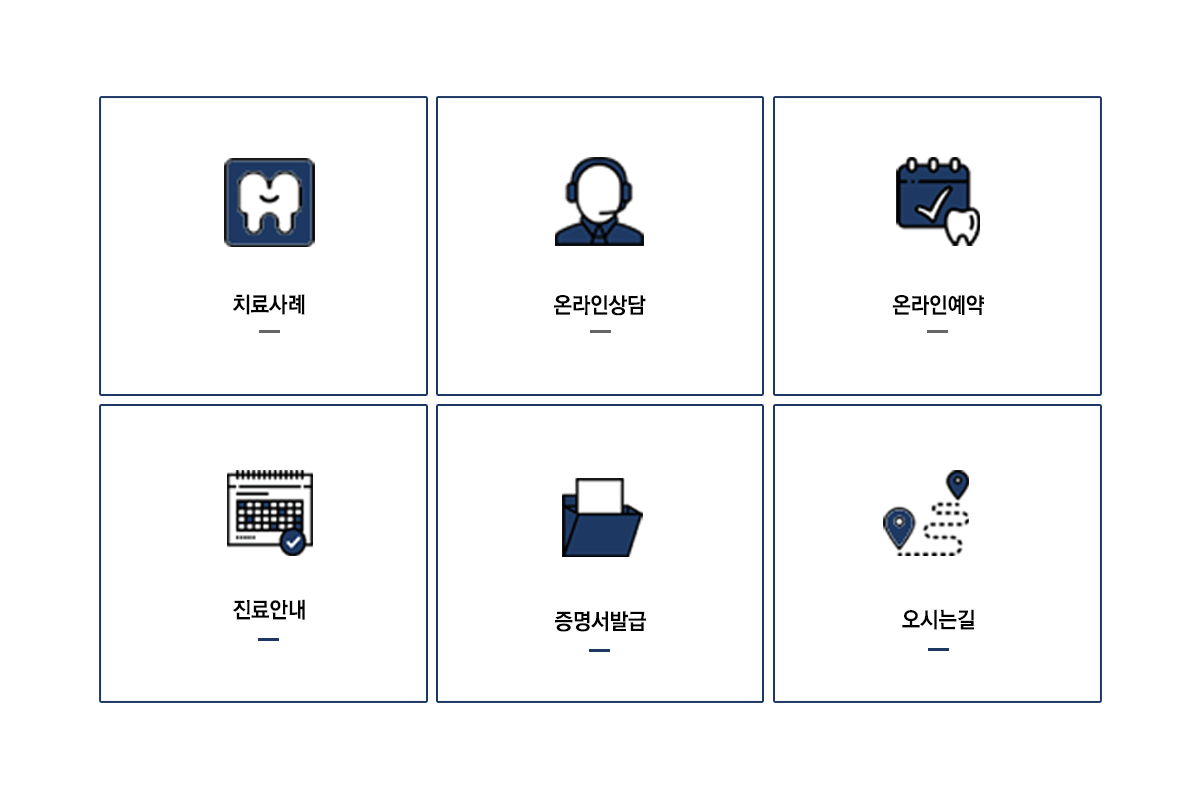
<style>
.page{position:relative;width:1200px;height:800px;background:#ffffff}
.page>*{position:absolute;margin:0}
.t1{font:22px "RixGoB";letter-spacing:-0.015em;color:#000000;scale:0.95 1}
</style>
<div class="page">
<p class="t1" style="left:233px;top:294px;width:72px;height:21px">치료사례</p>
<p class="t1" style="left:554px;top:295px;width:92px;height:21px">온라인상담</p>
<p class="t1" style="left:892px;top:295px;width:92px;height:20px">온라인예약</p>
<p class="t1" style="left:233px;top:599px;width:72px;height:21px">진료안내</p>
<p class="t1" style="left:555px;top:611px;width:91px;height:21px">증명서발급</p>
<p class="t1" style="left:902px;top:609px;width:72px;height:21px">오시는길</p>
</div>
